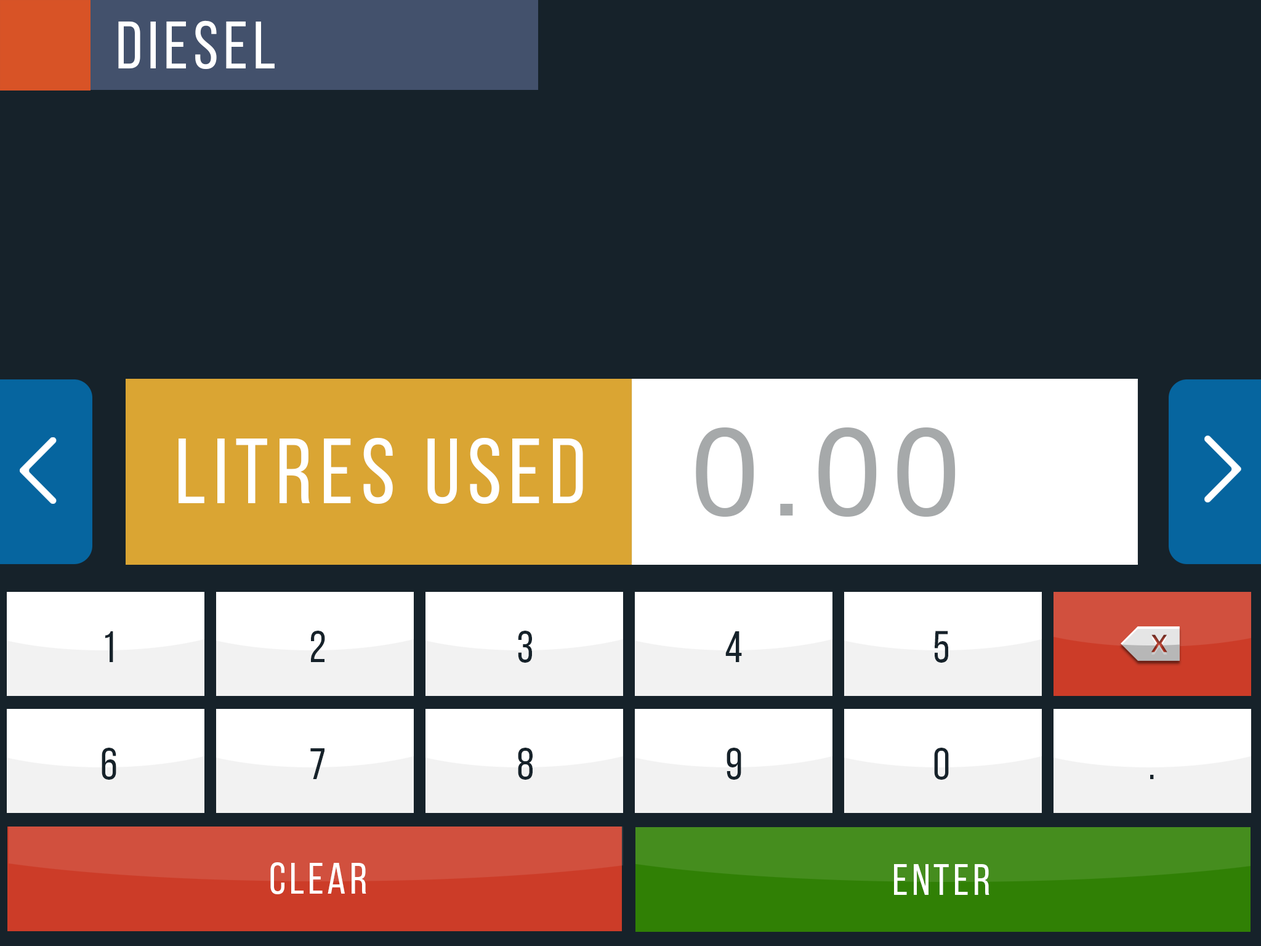
<style>
.page{position:relative;width:1261px;height:946px;background:#16222a}
.page>*{position:absolute;margin:0}
.t1{font:67.2px "BebasNeueRegular";letter-spacing:0.08em;color:#ffffff}
.t2{font:92.4px "BebasNeueRegular";letter-spacing:0.08em;color:#ffffff}
.t3{font:123.1px "ArialMT";letter-spacing:0.08em;color:#a6a9aa}
.t4{font:44.3px "BebasNeueRegular";letter-spacing:0.08em;color:#16222a}
.t5{font:44.3px "BebasNeueRegular";letter-spacing:0.08em;color:#ffffff}
</style>
<div class="page">
<p class="t1" style="left:118px;top:20px;width:157px;height:50px">DIESEL</p>
<p class="t2" style="left:179px;top:437px;width:404px;height:67px">litres used</p>
<p class="t3" style="left:696px;top:427px;width:260px;height:90px">0.00</p>
<p class="t4" style="left:105px;top:631px;width:8px;height:31px">1</p>
<p class="t4" style="left:311px;top:630px;width:14px;height:32px">2</p>
<p class="t4" style="left:518px;top:630px;width:14px;height:32px">3</p>
<p class="t4" style="left:725px;top:631px;width:17px;height:31px">4</p>
<p class="t4" style="left:935px;top:630px;width:13px;height:32px">5</p>
<p class="t4" style="left:102px;top:747px;width:14px;height:32px">6</p>
<p class="t4" style="left:310px;top:748px;width:14px;height:31px">7</p>
<p class="t4" style="left:518px;top:747px;width:15px;height:32px">8</p>
<p class="t4" style="left:727px;top:747px;width:14px;height:32px">9</p>
<p class="t4" style="left:934px;top:747px;width:15px;height:32px">0</p>
<p class="t4" style="left:1150px;top:775px;width:4px;height:4px">.</p>
<p class="t5" style="left:270px;top:862px;width:96px;height:32px">clear</p>
<p class="t5" style="left:894px;top:864px;width:95px;height:31px">enter</p>
</div>
